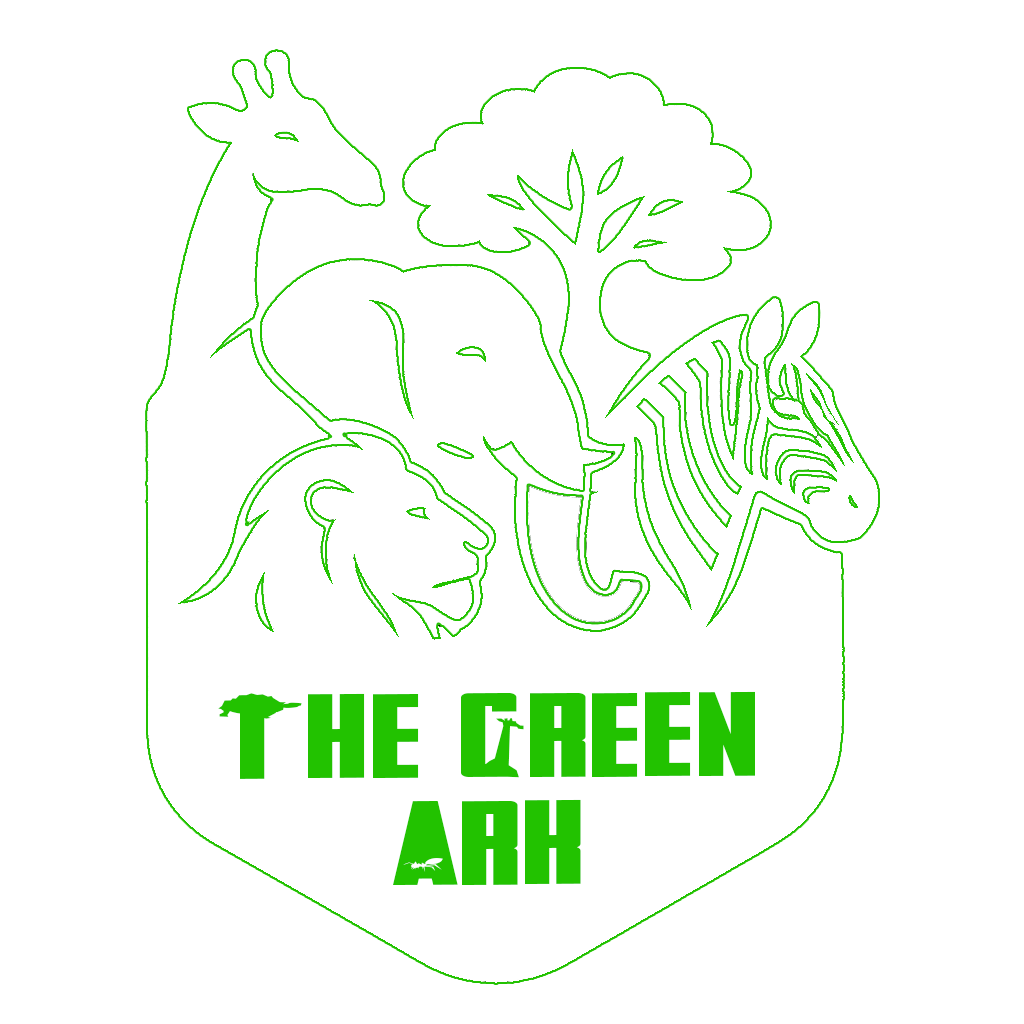
<style>
.page{position:relative;width:1024px;height:1024px;background:#ffffff}
.page>*{position:absolute;margin:0}
.t1{font:119.6px/107.2px "FalturaAnimals";letter-spacing:0.02em;color:#22c200;scale:1.77 1}
</style>
<div class="page">
<p class="t1" style="left:218px;top:691px;width:537px;height:194px;text-align:center">The Green<br>Ark</p>
</div>
